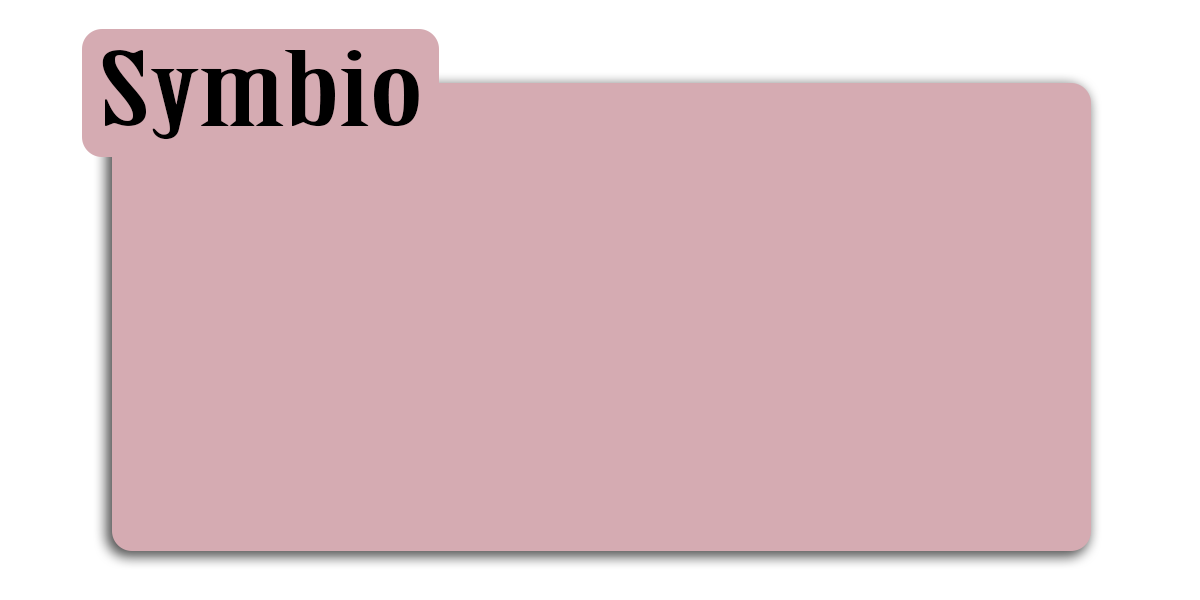
<style>
.page{position:relative;width:1200px;height:600px;background:#d5abb2}
.page>*{position:absolute;margin:0}
.t1{font:101.8px "BirchStd";color:#000000;scale:1.86 1}
</style>
<div class="page">
<p class="t1" style="left:102px;top:50px;width:317px;height:90px">Symbio</p>
</div>
